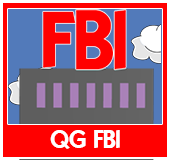
<style>
.page{position:relative;width:170px;height:160px;background:#ff0000}
.page>*{position:absolute;margin:0}
.t1{font:24px "ELEGANCE";color:#ffffff}
</style>
<div class="page">
<p class="t1" style="left:50px;top:130px;width:70px;height:19px">QG FBI</p>
</div>
